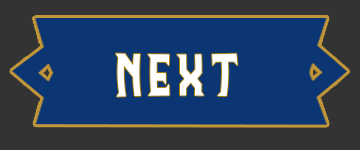
<style>
.page{position:relative;width:360px;height:150px;background:#0c3573}
.page>*{position:absolute;margin:0}
.t1{font:62.5px "Lorde-Havana";letter-spacing:0.1em;color:#ffffff;scale:0.75 1}
</style>
<div class="page">
<p class="t1" style="left:115px;top:53px;width:123px;height:44px">NEXT</p>
</div>
